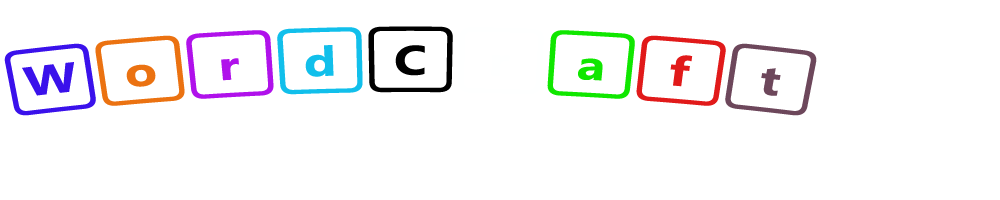
<style>
.page{position:relative;width:1000px;height:200px;background:#ffffff}
.page>*{position:absolute;margin:0}
.t1{font:56.2px "SegoeKeycaps";color:#3a11eb;scale:1.25 1}
.t2{font:56.2px "SegoeKeycaps";color:#eb7211;scale:1.25 1}
.t3{font:56.2px "SegoeKeycaps";color:#b011eb;scale:1.25 1}
.t4{font:56.2px "SegoeKeycaps";color:#11bfeb;scale:1.25 1}
.t5{font:56.2px "SegoeKeycaps";color:#000000;scale:1.25 1}
.t6{font:56.2px "SegoeKeycaps";color:#feffff;scale:1.25 1}
.t7{font:56.2px "SegoeKeycaps";color:#10e700;scale:1.25 1}
.t8{font:56.2px "SegoeKeycaps";color:#e11a1a;scale:1.25 1}
.t9{font:56.2px "SegoeKeycaps";color:#6d475b;scale:1.25 1}
</style>
<div class="page">
<p class="t1" style="left:4px;top:26px;width:813px;height:90px">W<span class="t2">o</span><span class="t3">r</span><span class="t4">d</span><span class="t5">C</span><span class="t6">r</span><span class="t7">a</span><span class="t8">f</span><span class="t9">t</span></p>
</div>
